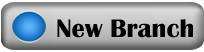
<style>
.page{position:relative;width:204px;height:52px}
.page>*{position:absolute;margin:0}
.t1{font:26.2px "BritannicBold";color:#000000}
</style>
<div class="page">
<p class="t1" style="left:57px;top:19px;width:136px;height:19px">New Branch</p>
</div>
